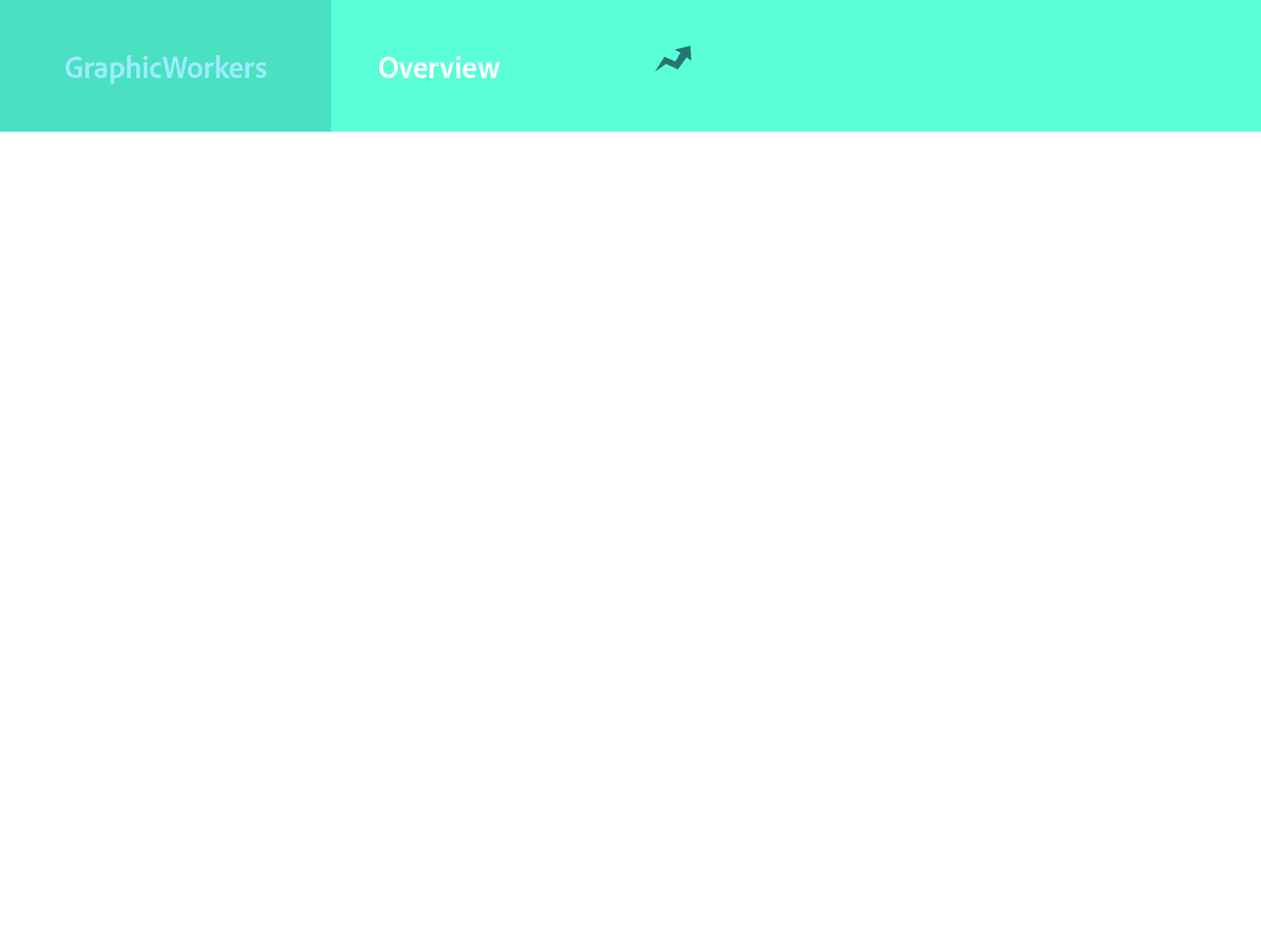
<style>
.page{position:relative;width:1261px;height:946px;background:#ffffff}
.page>*{position:absolute;margin:0}
.t1{font:31.5px "AdobeClean-BoldSemiCn";color:#9eebfe}
.t2{font:31.5px "AdobeClean-BoldSemiCn";color:#ffffff}
</style>
<div class="page">
<p class="t1" style="left:65px;top:55px;width:201px;height:29px">GraphicWorkers</p>
<p class="t2" style="left:379px;top:56px;width:121px;height:22px">Overview</p>
</div>
